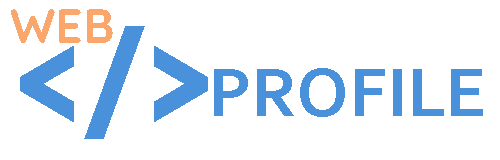
<style>
.page{position:relative;width:500px;height:160px;background:#ffffff}
.page>*{position:absolute;margin:0}
.t1{font:48px "Quicksand-Bold";color:#fba66b}
.t2{font:72px "Corbel-Bold";color:#4a91dc}
</style>
<div class="page">
<p class="t1" style="left:11px;top:9px;width:102px;height:34px">WEB</p>
<p class="t2" style="left:214px;top:68px;width:269px;height:49px">PROFILE</p>
</div>
